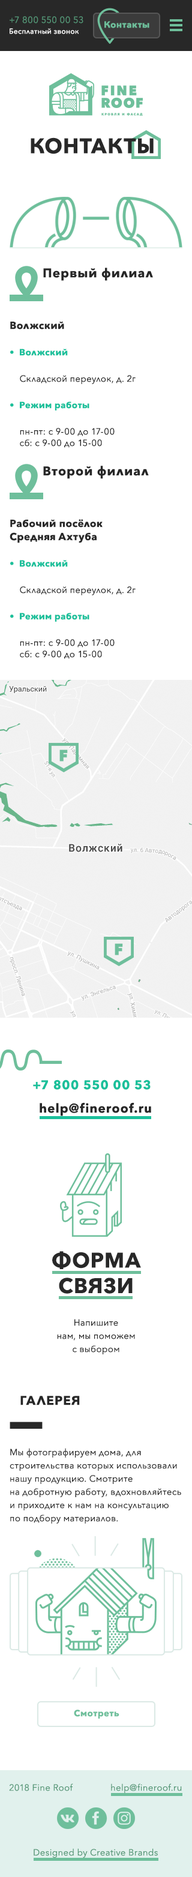
<style>
.page{position:relative;width:192px;height:1877px;background:#ffffff}
.page>*{position:absolute;margin:0}
.t1{font:9px "AvenirNext-Regular";letter-spacing:0.025em;color:#559777}
.t2{font:7.2px "AvenirNext-Medium";letter-spacing:0.025em;color:#ffffff}
.t3{font:9px "AvenirNext-Bold";letter-spacing:0.025em;color:#6ebf9b}
.t4{font:21px "AvenirNext-Bold";letter-spacing:0.05em;color:#282828;text-transform:uppercase}
.t5{font:12.6px "AvenirNext-Bold";letter-spacing:0.05em;color:#272727}
.t6{font:9px/13.2px "AvenirNext-Regular";letter-spacing:0.025em;color:#232323}
.t7{font:10.2px/13.2px "AvenirNext-Bold";letter-spacing:0.025em;color:#282828}
.t8{font:9px/13.2px "AvenirNext-Regular";letter-spacing:0.025em;color:#1bc09b}
.t9{font:9px/13.2px "AvenirNext-Bold";letter-spacing:0.025em;color:#1bc09b}
.t10{font:9px/11.4px "AvenirNext-Regular";letter-spacing:0.025em;color:#232323}
.t11{font:12.6px "AvenirNext-Bold";letter-spacing:0.05em;color:#1bc09b}
.t12{font:21px/25.5px "AvenirNext-Bold";letter-spacing:0.05em;color:#282828;text-transform:uppercase}
.t13{font:9px/13.2px "AvenirNext-Regular";letter-spacing:0.025em;color:#282828}
.t14{font:12.6px "AvenirNext-Bold";letter-spacing:0.05em;color:#272727;text-transform:uppercase}
.t15{font:9px/13.2px "AvenirNext-Regular";letter-spacing:0.025em;color:#272727}
</style>
<div class="page">
<p class="t1" style="left:10px;top:16px;width:73px;height:7px">+7 800 550 00 53</p>
<p class="t2" style="left:10px;top:28px;width:69px;height:6px">Бесплатный звонок</p>
<p class="t3" style="left:104px;top:21px;width:45px;height:7px">Контакты</p>
<p class="t4" style="left:31px;top:137px;width:123px;height:17px">контакты</p>
<p class="t5" style="left:43px;top:268px;width:110px;height:13px">Первый филиал</p>
<p class="t6" style="left:10px;top:322px;width:126px;height:126px"><span class="t7">Волжский<br><br></span><span class="t8">•  </span><span class="t9">Волжский<br></span><br>    Складской переулок, д. 2г<br><br><span class="t8">•  </span><span class="t9">Режим работы<br><br></span>    пн-пт: с 9-00 до 17-00<br><span class="t10">    сб: с 9-00 до 15-00</span></p>
<p class="t5" style="left:43px;top:466px;width:106px;height:13px">Второй филиал</p>
<p class="t7" style="left:10px;top:519px;width:126px;height:140px">Рабочий посёлок<br>Средняя Ахтуба<br><br><span class="t8">•  </span><span class="t9">Волжский<br></span><span class="t6"><br>    Складской переулок, д. 2г<br><br></span><span class="t8">•  </span><span class="t9">Режим работы<br><br></span><span class="t6">    пн-пт: с 9-00 до 17-00<br></span><span class="t10">    сб: с 9-00 до 15-00</span></p>
<p class="t11" style="left:33px;top:1079px;width:118px;height:11px">+7 800 550 00 53</p>
<p class="t5" style="left:40px;top:1102px;width:111px;height:14px">help@fineroof.ru</p>
<p class="t12" style="left:52px;top:1251px;width:89px;height:43px;text-align:center">ФОРМА<br>СВЯЗИ</p>
<p class="t13" style="left:57px;top:1319px;width:78px;height:35px;text-align:center">Напишите<br>нам, мы поможем<br>с выбором</p>
<p class="t14" style="left:20px;top:1396px;width:60px;height:9px">ГАЛЕРЕЯ</p>
<p class="t15" style="left:10px;top:1448px;width:171px;height:75px">Мы фотографируем дома, для <br>строительства которых использовали <br>нашу продукцию. Смотрите <br>на добротную работу, вдохновляйтесь <br>и приходите к нам на консультацию <br>по подбору материалов.</p>
<p class="t3" style="left:74px;top:1709px;width:45px;height:9px">Смотреть</p>
<p class="t1" style="left:9px;top:1783px;width:64px;height:8px">2018 Fine Roof</p>
<p class="t1" style="left:111px;top:1783px;width:71px;height:10px">help@fineroof.ru</p>
<p class="t1" style="left:34px;top:1848px;width:124px;height:10px">Designed by Creative Brands</p>
</div>
